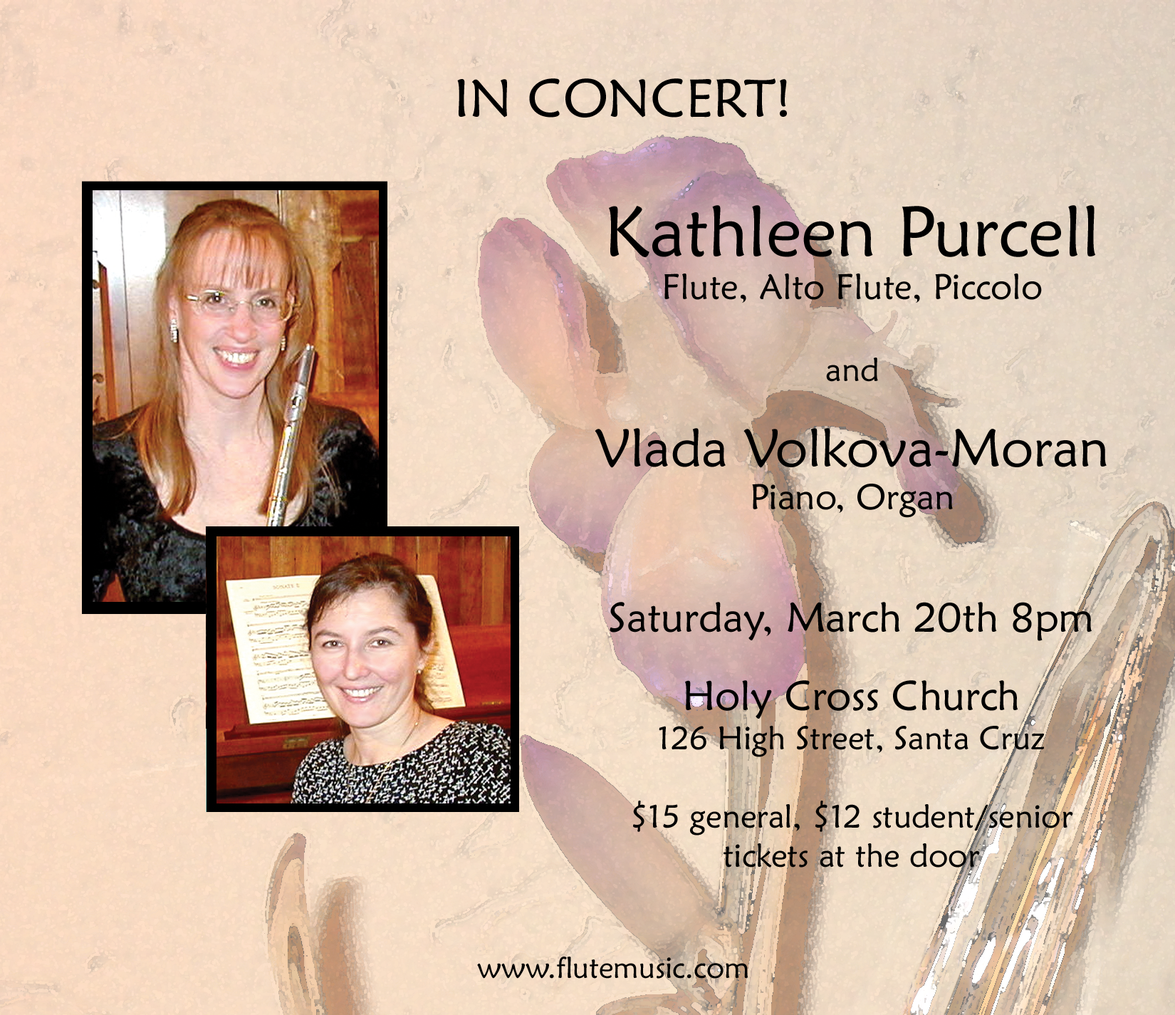
<style>
.page{position:relative;width:1175px;height:1015px}
.page>*{position:absolute;margin:0}
.t1{font:53.4px "MaiandraGD-Regular";color:#000000}
.t2{font:35.6px "MaiandraGD-Regular";color:#000000}
.t3{font:71.2px "MaiandraGD-Regular";color:#000000}
.t4{font:32.6px "MaiandraGD-Regular";color:#000000}
.t5{font:41.5px "MaiandraGD-Regular";color:#000000}
.t6{font:29.7px "MaiandraGD-Regular";color:#000000}
</style>
<div class="page">
<p class="t1" style="left:457px;top:78px;width:330px;height:40px">IN CONCERT!</p>
<p class="t2" style="left:595px;top:205px;width:512px;height:313px;text-align:center"><span class="t3">Kathleen Purcell<br></span>Flute, Alto Flute, Piccolo<br><br><span class="t4">and<br><br></span><span class="t1">Vlada Volkova-Moran<br></span>Piano, Organ</p>
<p class="t4" style="left:610px;top:602px;width:482px;height:265px;text-align:center"><span class="t5">Saturday, March 20th 8pm<br><br>Holy Cross Church<br></span>126 High Street, Santa Cruz<br><br>$15 general, $12 student/senior<br>tickets at the door</p>
<p class="t6" style="left:477px;top:956px;width:271px;height:22px">www.flutemusic.com</p>
</div>
